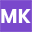
<style>
.page{position:relative;width:32px;height:32px;background:#7a48cc}
.page>*{position:absolute;margin:0}
.t1{font:20px "GTWalsheim-Bold";color:#ffffff}
</style>
<div class="page">
<p class="t1" style="left:1px;top:9px;width:30px;height:14px">MK</p>
</div>
